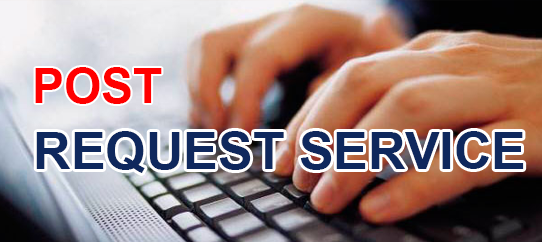
<style>
.page{position:relative;width:542px;height:242px}
.page>*{position:absolute;margin:0}
.t1{font:48px "Arial-BoldMT";color:#ff0000}
.t2{font:52px "Arial-BoldMT";color:#0f285d}
</style>
<div class="page">
<p class="t1" style="left:35px;top:67px;width:127px;height:37px">POST</p>
<p class="t2" style="left:36px;top:131px;width:488px;height:42px">REQUEST SERVICE</p>
</div>
